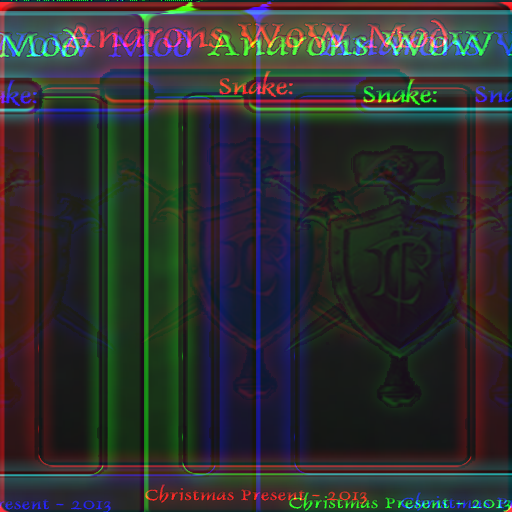
<style>
.page{position:relative;width:512px;height:512px}
.page>*{position:absolute;margin:0}
.t1{font:37.3px "Skurri";scale:1.33 1}
.t2{font:24px "Skurri";scale:1.33 1}
</style>
<div class="page">
<p class="t1" style="left:63px;top:17px;width:386px;height:30px">Anarons WoW Mod</p>
<p class="t2" style="left:219px;top:68px;width:74px;height:27px">Snake:</p>
</div>
